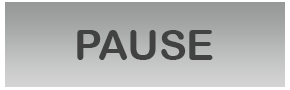
<style>
.page{position:relative;width:290px;height:90px}
.page>*{position:absolute;margin:0}
.t1{font:41.7px "ArialRoundedMTBold";color:#424242}
</style>
<div class="page">
<p class="t1" style="left:77px;top:30px;width:136px;height:30px">PAUSE</p>
</div>
